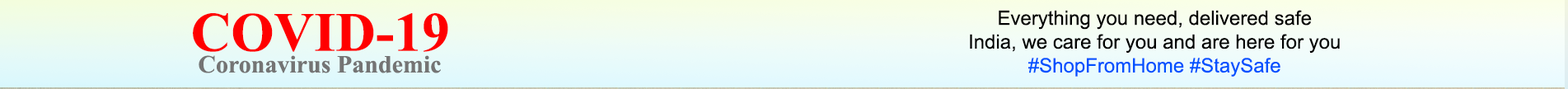
<style>
.page{position:relative;width:1568px;height:89px}
.page>*{position:absolute;margin:0}
.t1{font:55.5px "TimesNewRomanPS-BoldMT";color:#ff0000}
.t2{font:19.8px "ArialMT";color:#000000}
.t3{font:19.8px "ArialMT";color:#0051ff}
.t4{font:24.7px "TimesNewRomanPS-BoldMT";color:#747474}
</style>
<div class="page">
<p class="t1" style="left:193px;top:13px;width:255px;height:39px">COVID-19</p>
<p class="t2" style="left:970px;top:10px;width:370px;height:67px;text-align:center">Everything you need, delivered safe<br>India, we care for you and are here for you<br><span class="t3">#ShopFromHome #StaySafe</span></p>
<p class="t4" style="left:199px;top:55px;width:242px;height:18px">Coronavirus Pandemic</p>
</div>
